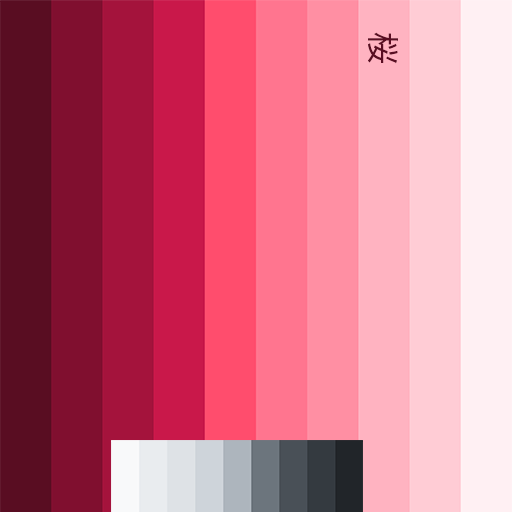
<style>
.page{position:relative;width:512px;height:512px}
.page>*{position:absolute;margin:0}
.t1{font:32px "KozGoPr6N-Regular";color:#590d22}
</style>
<div class="page">
<p class="t1" style="left:368px;top:32px;width:30px;height:32px;rotate:90deg">桜</p>
</div>
